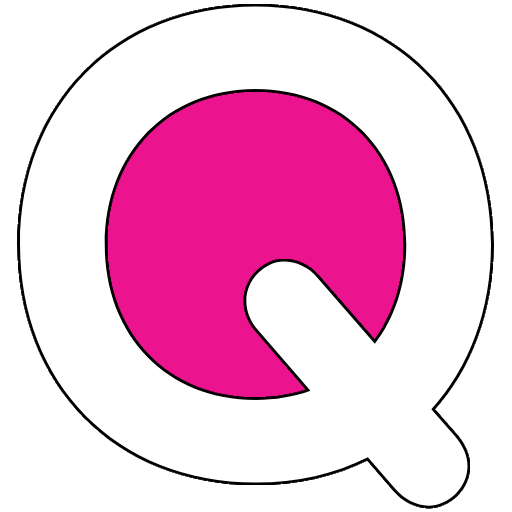
<style>
.page{position:relative;width:512px;height:512px;background:#ffffff}
.page>*{position:absolute;margin:0}
.t1{font:650px "GTMaruTrial-Medium";color:#ffffff}
</style>
<div class="page">
<p class="t1" style="left:20px;top:6px;width:472px;height:500px">Q</p>
</div>
